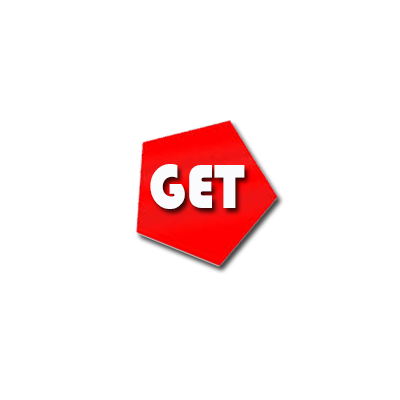
<style>
.page{position:relative;width:400px;height:400px;background:#ffffff}
.page>*{position:absolute;margin:0}
.t1{font:64.6px "Bauhaus93";color:#fafbfd;scale:0.92 1}
</style>
<div class="page">
<p class="t1" style="left:150px;top:164px;width:95px;height:45px">GET</p>
</div>
